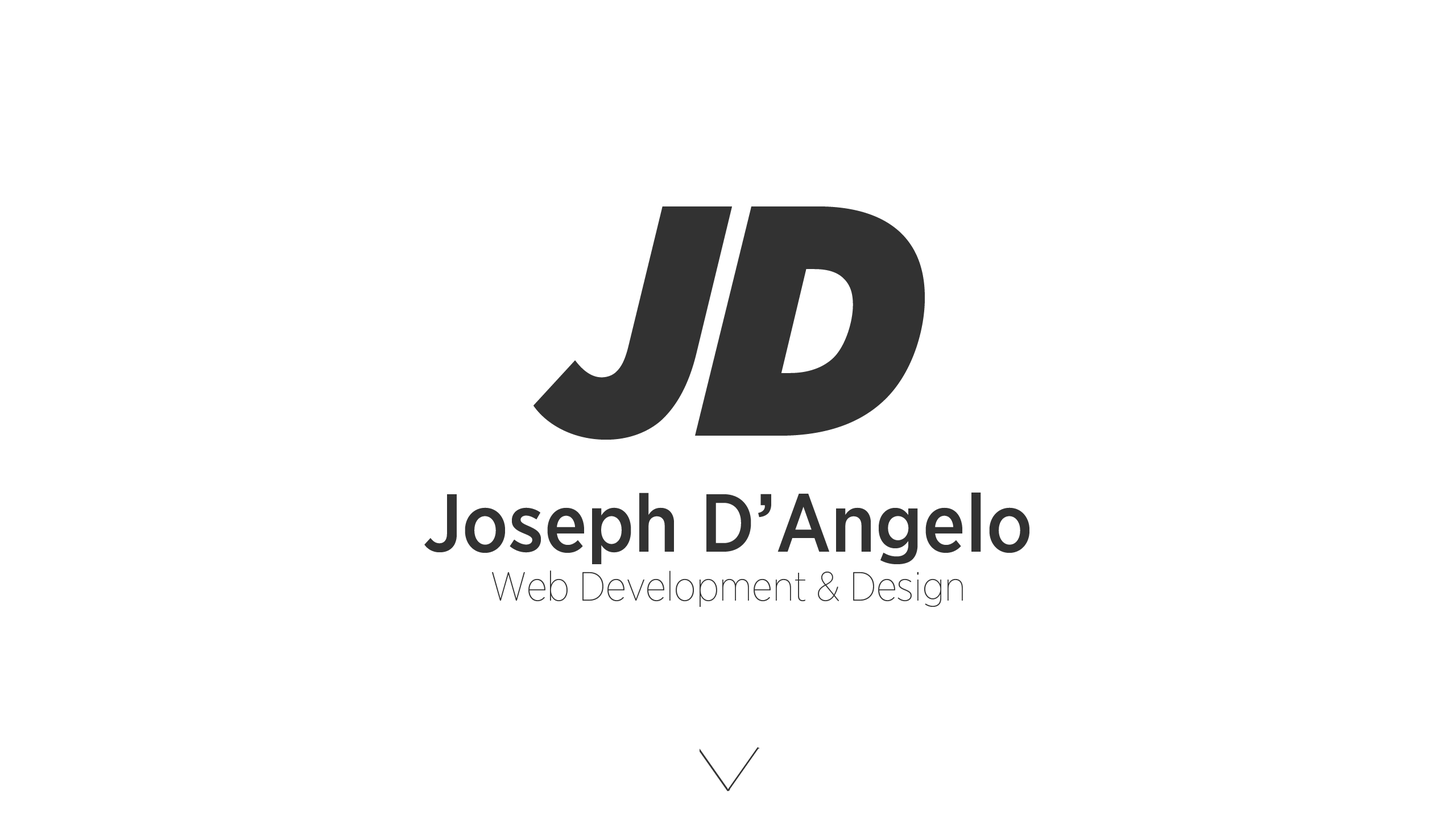
<style>
.page{position:relative;width:1456px;height:819px;background:#ffffff}
.page>*{position:absolute;margin:0}
.t1{font:327.6px "GothamNarrow-UltraItalic";color:#323232}
.t2{font:40.9px "GothamNarrow-Thin";color:#323232}
.t3{font:81.9px "GothamNarrow-Medium";color:#323232}
</style>
<div class="page">
<p class="t1" style="left:533px;top:206px;width:392px;height:234px">JD</p>
<p class="t2" style="left:424px;top:493px;width:605px;height:114px;text-align:center"><span class="t3">Joseph D’Angelo<br></span>Web Development &amp; Design</p>
</div>
